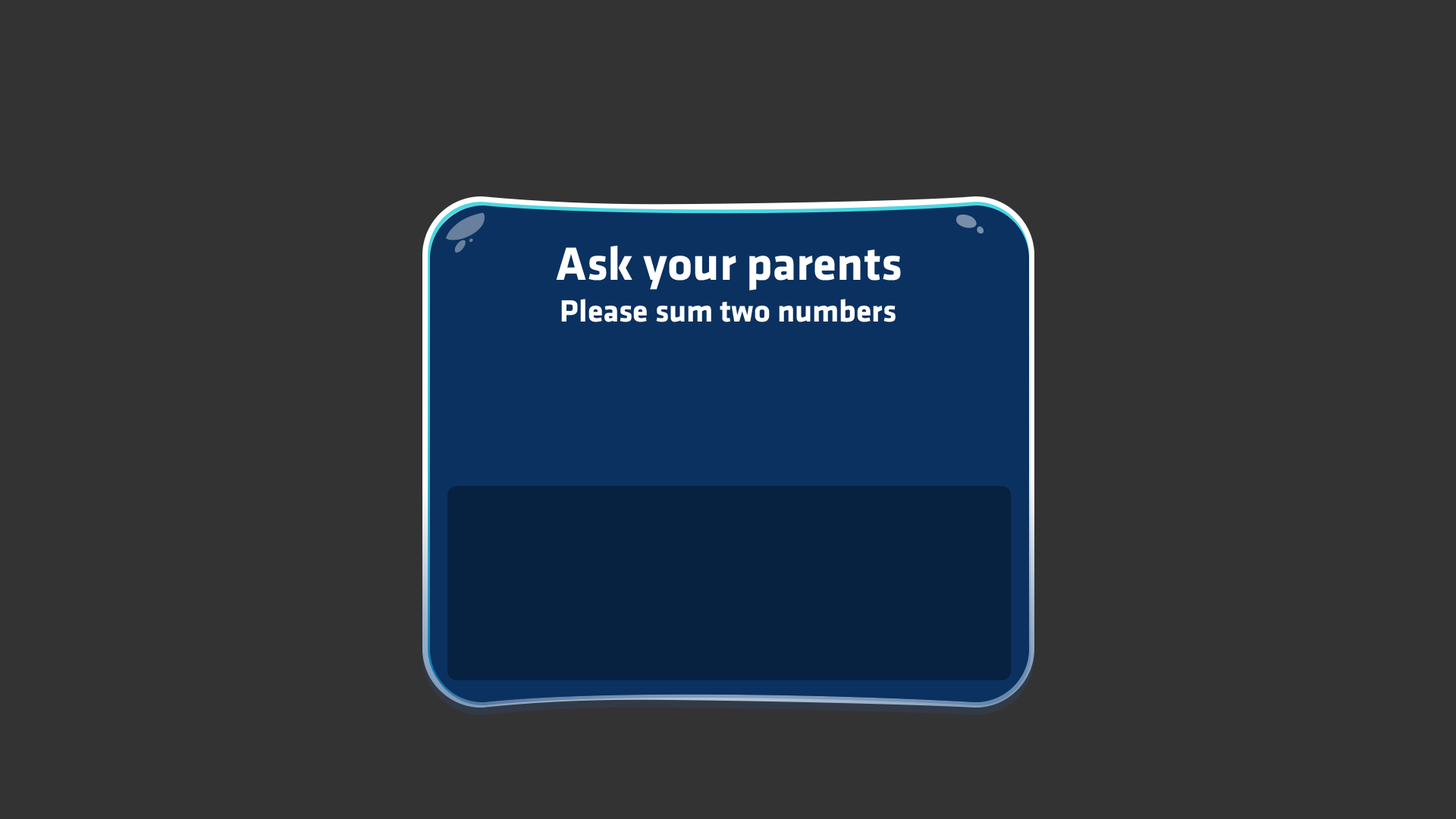
<style>
.page{position:relative;width:1456px;height:819px;background:#333333}
.page>*{position:absolute;margin:0}
.t1{font:48.5px "UTMFacebookK&TBold";color:#ffffff}
.t2{font:31.9px "UTMFacebookK&TBold";color:#ffffff}
</style>
<div class="page">
<p class="t1" style="left:556px;top:245px;width:345px;height:45px">Ask your parents</p>
<p class="t2" style="left:561px;top:299px;width:335px;height:23px">Please sum two numbers</p>
</div>
